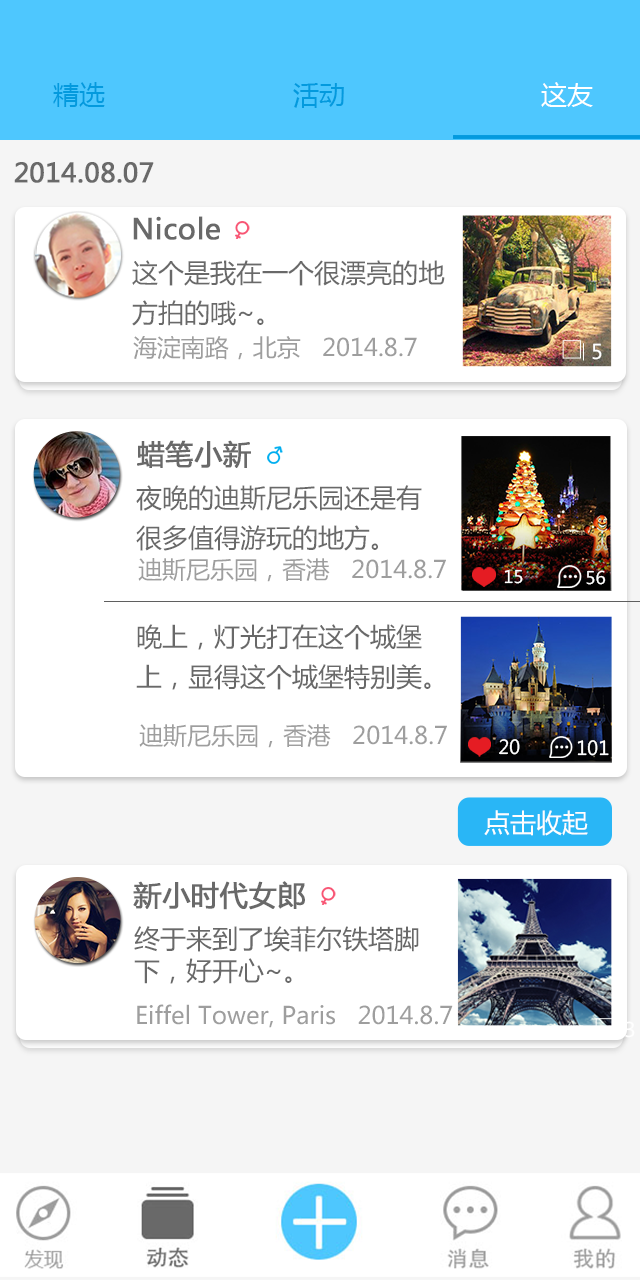
<style>
.page{position:relative;width:640px;height:1280px;background:#ffffff}
.page>*{position:absolute;margin:0}
.t1{font:26px "MicrosoftYaHei";letter-spacing:0.005em;color:#039ade}
.t2{font:26px "MicrosoftYaHei";letter-spacing:0.005em;color:#ffffff}
.t3{font:26px "MicrosoftYaHei";color:#696969;font-weight:bold}
.t4{font:28px "MicrosoftYaHei";color:#696969;font-weight:bold}
.t5{font:26px/40px "MicrosoftYaHei";color:#696969}
.t6{font:24px "MicrosoftYaHei";color:#9e9e9e}
.t7{font:20px "MicrosoftYaHei";color:#fefefe}
.t8{font:17.4px "MicrosoftYaHei";color:#fefefe}
.t9{font:17.4px "MicrosoftYaHei";color:#ffffff}
.t10{font:19.1px "MicrosoftYaHei";color:#fefefe}
.t11{font:19.1px "MicrosoftYaHei";color:#ffffff}
.t12{font:26px "MicrosoftYaHei";color:#fefefe}
.t13{font:26px "MicrosoftYaHei";color:#696969}
</style>
<div class="page">
<p class="t1" style="left:53px;top:82px;width:540px;height:26px">精选                        活动                         <span class="t2">这友</span></p>
<p class="t3" style="left:14px;top:162px;width:140px;height:21px">2014.08.07</p>
<p class="t4" style="left:133px;top:216px;width:87px;height:24px">Nicole</p>
<p class="t5" style="left:132px;top:260px;width:313px;height:66px;text-align:justify">这个是我在一个很漂亮的地<br>方拍的哦~。</p>
<p class="t6" style="left:133px;top:336px;width:284px;height:24px">海淀南路，北京   2014.8.7</p>
<p class="t7" style="left:592px;top:343px;width:10px;height:17px">5</p>
<p class="t4" style="left:137px;top:440px;width:114px;height:28px">蜡笔小新</p>
<p class="t5" style="left:136px;top:485px;width:286px;height:66px;text-align:justify">夜晚的迪斯尼乐园还是有<br>很多值得游玩的地方。</p>
<p class="t6" style="left:138px;top:558px;width:308px;height:24px">迪斯尼乐园，香港   2014.8.7</p>
<p class="t8" style="left:504px;top:569px;width:19px;height:15px">15</p>
<p class="t9" style="left:586px;top:570px;width:20px;height:15px">56</p>
<p class="t5" style="left:136px;top:624px;width:295px;height:66px;text-align:justify">晚上，灯光打在这个城堡<br>上，显得这个城堡特别美。</p>
<p class="t6" style="left:139px;top:724px;width:308px;height:24px">迪斯尼乐园，香港   2014.8.7</p>
<p class="t10" style="left:499px;top:739px;width:21px;height:16px">20</p>
<p class="t11" style="left:577px;top:740px;width:32px;height:16px">101</p>
<p class="t12" style="left:484px;top:810px;width:104px;height:26px">点击收起</p>
<p class="t4" style="left:133px;top:881px;width:172px;height:29px">新小时代女郎</p>
<p class="t13" style="left:134px;top:926px;width:285px;height:58px;text-align:justify">终于来到了埃菲尔铁塔脚<br>下，好开心~。</p>
<p class="t6" style="left:137px;top:1004px;width:316px;height:24px">Eiffel Tower, Paris   2014.8.7</p>
<p class="t7" style="left:625px;top:1021px;width:10px;height:17px">3</p>
</div>
